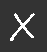
<style>
.page{position:relative;width:47px;height:52px;background:#333333}
.page>*{position:absolute;margin:0}
.t1{font:35.3px "SegoePrint";color:#ffffff}
</style>
<div class="page">
<p class="t1" style="left:10px;top:13px;width:25px;height:28px">X</p>
</div>
